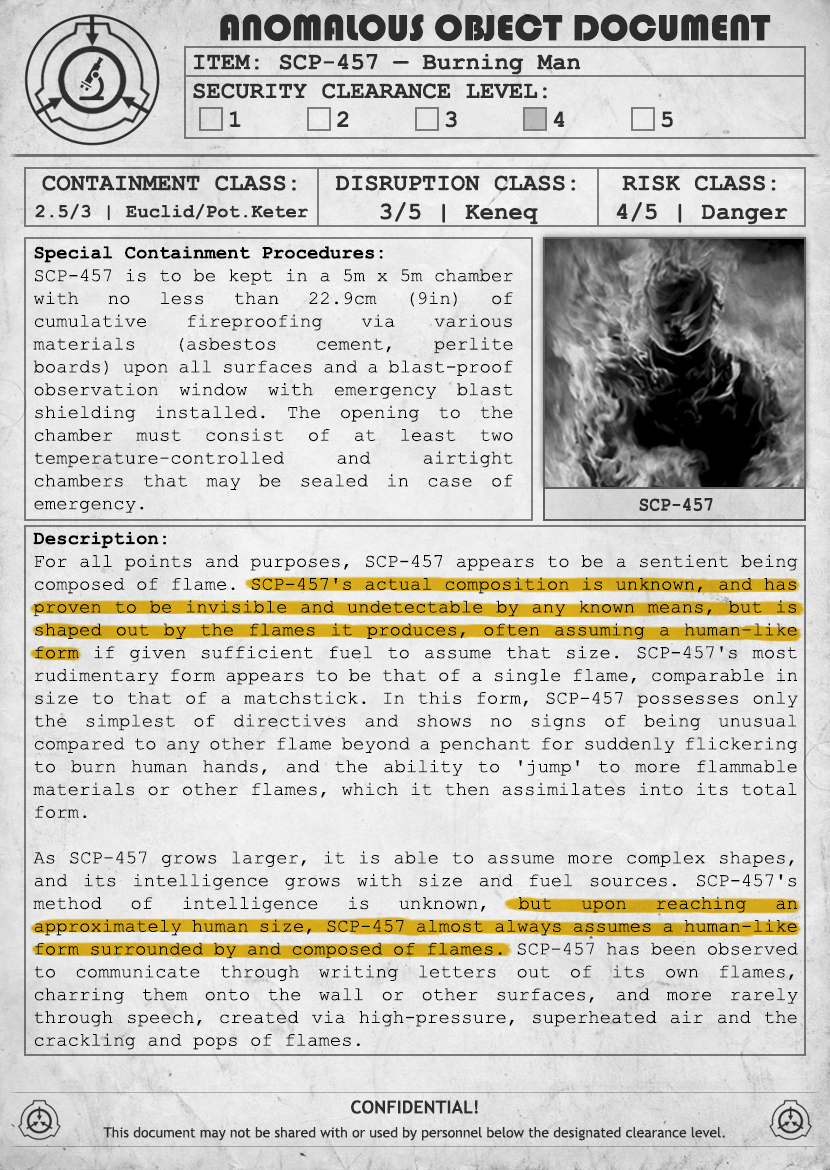
<style>
.page{position:relative;width:830px;height:1170px}
.page>*{position:absolute;margin:0}
.t1{font:38px "Bauhaus93";color:#333333;text-transform:uppercase}
.t2{font:24px "CourierNewPS-BoldMT";color:#333333}
.t3{font:24px "CourierNewPS-BoldMT";color:#333333;text-transform:uppercase}
.t4{font:19px/27px "CourierNewPS-BoldMT";color:#333333}
.t5{font:24px/27px "CourierNewPS-BoldMT";color:#333333}
.t6{font:19px "CourierNewPSMT";color:#000000}
.t7{font:19px "CourierNewPS-BoldMT";color:#000000}
.t8{font:20.1px "CourierNewPS-BoldMT";color:#333333;scale:0.9 1}
.t9{font:14px/24px "TrebuchetMS";color:#333333}
.t10{font:18px/24px "TrebuchetMS-Bold";color:#333333}
</style>
<div class="page">
<p class="t1" style="left:220px;top:14px;width:551px;height:27px">anomalous object document</p>
<p class="t2" style="left:193px;top:53px;width:480px;height:75px">ITEM: SCP-457 — Burning Man<br><span class="t3">Security CLEARANCE LEVEL:</span> <br> 1   2   3   4   5</p>
<p class="t4" style="left:35px;top:175px;width:273px;height:46px;text-align:center"><span class="t5">CONTAINMENT CLASS:<br></span>2.5/3 | Euclid/Pot.Keter</p>
<p class="t2" style="left:335px;top:175px;width:241px;height:50px;text-align:center">DISRUPTION CLASS:<br>3/5 | Keneq</p>
<p class="t2" style="left:616px;top:175px;width:172px;height:50px;text-align:center">RISK CLASS:<br>4/5 | Danger</p>
<p class="t6" style="left:33px;top:246px;width:480px;height:267px;text-align:justify"><span class="t7">Special Containment Procedures: <br></span>SCP-457 is to be kept in a 5m x 5m chamber with no less than 22.9cm (9in) of cumulative fireproofing via various materials (asbestos cement, perlite boards) upon all surfaces and a blast-proof observation window with emergency blast shielding installed. The opening to the chamber must consist of at least two temperature-controlled and airtight chambers that may be sealed in case of emergency.</p>
<p class="t8" style="left:639px;top:498px;width:74px;height:14px">SCP-457</p>
<p class="t6" style="left:33px;top:532px;width:765px;height:518px;text-align:justify"><span class="t7">Description:<br></span>For all points and purposes, SCP-457 appears to be a sentient being composed of flame. SCP-457's actual composition is unknown, and has proven to be invisible and undetectable by any known means, but is shaped out by the flames it produces, often assuming a human-like form if given sufficient fuel to assume that size. SCP-457's most rudimentary form appears to be that of a single flame, comparable in size to that of a matchstick. In this form, SCP-457 possesses only the simplest of directives and shows no signs of being unusual compared to any other flame beyond a penchant for suddenly flickering to burn human hands, and the ability to 'jump' to more flammable materials or other flames, which it then assimilates into its total form.<br><br>As SCP-457 grows larger, it is able to assume more complex shapes, and its intelligence grows with size and fuel sources. SCP-457's method of intelligence is unknown, but upon reaching an approximately human size, SCP-457 almost always assumes a human-like form surrounded by and composed of flames. SCP-457 has been observed to communicate through writing letters out of its own flames, charring them onto the wall or other surfaces, and more rarely through speech, created via high-pressure, superheated air and the crackling and pops of flames.</p>
<p class="t9" style="left:103px;top:1100px;width:622px;height:41px;text-align:center"><span class="t10">CONFIDENTIAL!<br></span>This document may not be shared with or used by personnel below the designated clearance level.</p>
</div>
